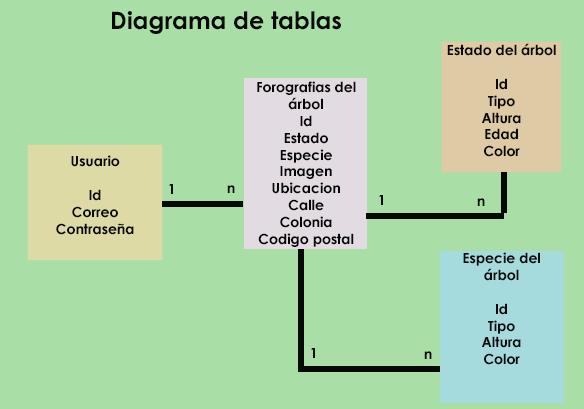
<style>
.page{position:relative;width:584px;height:409px;background:#a9dea6}
.page>*{position:absolute;margin:0}
.t1{font:24px "CenturyGothic-Bold";color:#080808}
.t2{font:14px "CenturyGothic-Bold";color:#080808}
.t3{font:14px "CenturyGothic-Bold";color:#050505}
</style>
<div class="page">
<p class="t1" style="left:112px;top:11px;width:229px;height:23px">Diagrama de tablas</p>
<p class="t2" style="left:447px;top:43px;width:109px;height:114px;text-align:center">Estado del árbol<br><br>Id<br>Tipo<br>Altura<br>Edad<br>Color</p>
<p class="t3" style="left:257px;top:81px;width:99px;height:166px;text-align:center"><span class="t2">Forografias del árbol<br></span>Id<br>Estado<br>Especie<br>Imagen<br>Ubicacion<br>Calle<br>Colonia<br>Codigo postal<br>Municipio</p>
<p class="t2" style="left:56px;top:155px;width:78px;height:80px;text-align:center">Usuario<br><br>Id<br>Correo<br>Contraseña</p>
<p class="t2" style="left:169px;top:184px;width:4px;height:10px">1</p>
<p class="t2" style="left:227px;top:185px;width:8px;height:8px">n</p>
<p class="t2" style="left:379px;top:195px;width:4px;height:10px">1</p>
<p class="t2" style="left:477px;top:198px;width:8px;height:8px">n</p>
<p class="t2" style="left:463px;top:252px;width:77px;height:113px;text-align:center">Especie del árbol<br><br>Id<br>Tipo<br>Altura<br>Color</p>
<p class="t2" style="left:311px;top:348px;width:4px;height:10px">1</p>
<p class="t2" style="left:424px;top:351px;width:8px;height:8px">n</p>
</div>
